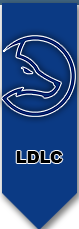
<style>
.page{position:relative;width:79px;height:229px;background:#0b3a84}
.page>*{position:absolute;margin:0}
.t1{font:16.7px "Arial-Black";letter-spacing:-0.01em;color:#000000}
</style>
<div class="page">
<p class="t1" style="left:16px;top:151px;width:47px;height:12px">LDLC</p>
</div>
